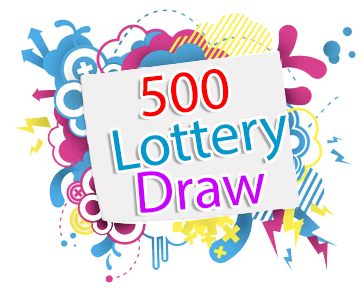
<style>
.page{position:relative;width:364px;height:292px;background:#ffffff}
.page>*{position:absolute;margin:0}
.t1{font:60px "MyriadPro-Regular";color:#ff0000}
.t2{font:60px "MyriadPro-Regular";color:#0099cc}
.t3{font:60px "MyriadPro-Regular";color:#cc00ff}
</style>
<div class="page">
<p class="t1" style="left:142px;top:69px;width:87px;height:48px;rotate:-6deg">500</p>
<p class="t2" style="left:112px;top:115px;width:174px;height:56px;rotate:-9deg">Lottery</p>
<p class="t3" style="left:137px;top:171px;width:128px;height:42px;rotate:-5deg">Draw</p>
</div>
